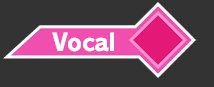
<style>
.page{position:relative;width:214px;height:87px;background:#333333}
.page>*{position:absolute;margin:0}
.t1{font:24px "RodinPro-EB";color:#ffffff;scale:0.92 1}
</style>
<div class="page">
<p class="t1" style="left:52px;top:32px;width:62px;height:20px">Vocal</p>
</div>
